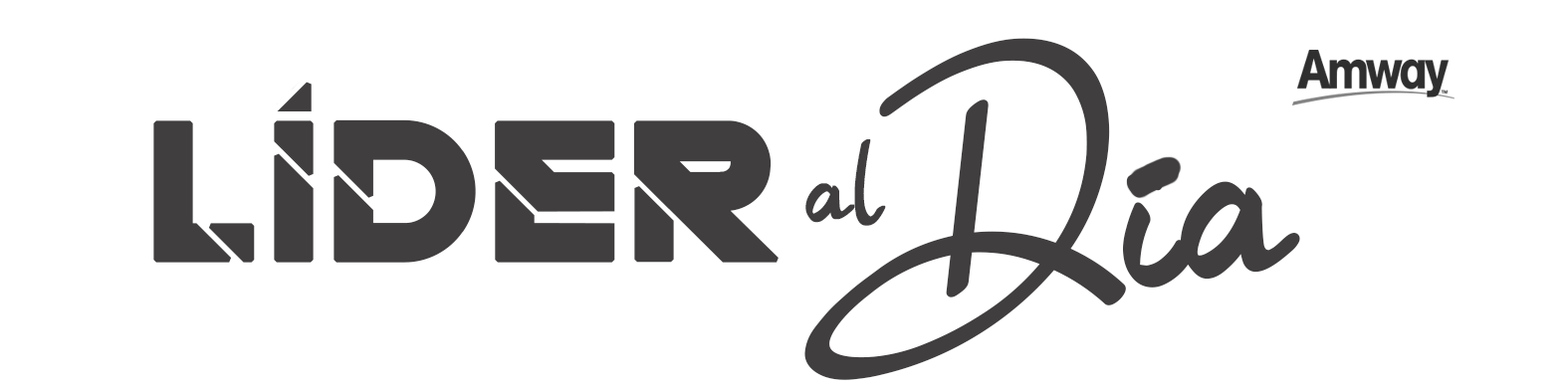
<style>
.page{position:relative;width:1568px;height:392px;background:#ffffff}
.page>*{position:absolute;margin:0}
.t1{font:199.1px/589.1px "BulgattiRegular";color:#403e3e;font-weight:bold}
.t2{font:199.1px "QuantumRegular";color:#403e3e;font-weight:bold}
.t3{font:82.2px "BulgattiRegular";letter-spacing:0.04em;color:#403e3e;font-weight:bold}
</style>
<div class="page">
<p class="t1" style="left:804px;top:38px;width:496px;height:342px;text-align:center">Dia</p>
<p class="t2" style="left:153px;top:119px;width:626px;height:144px">LÍDER</p>
<p class="t3" style="left:805px;top:139px;width:81px;height:87px">al</p>
</div>
